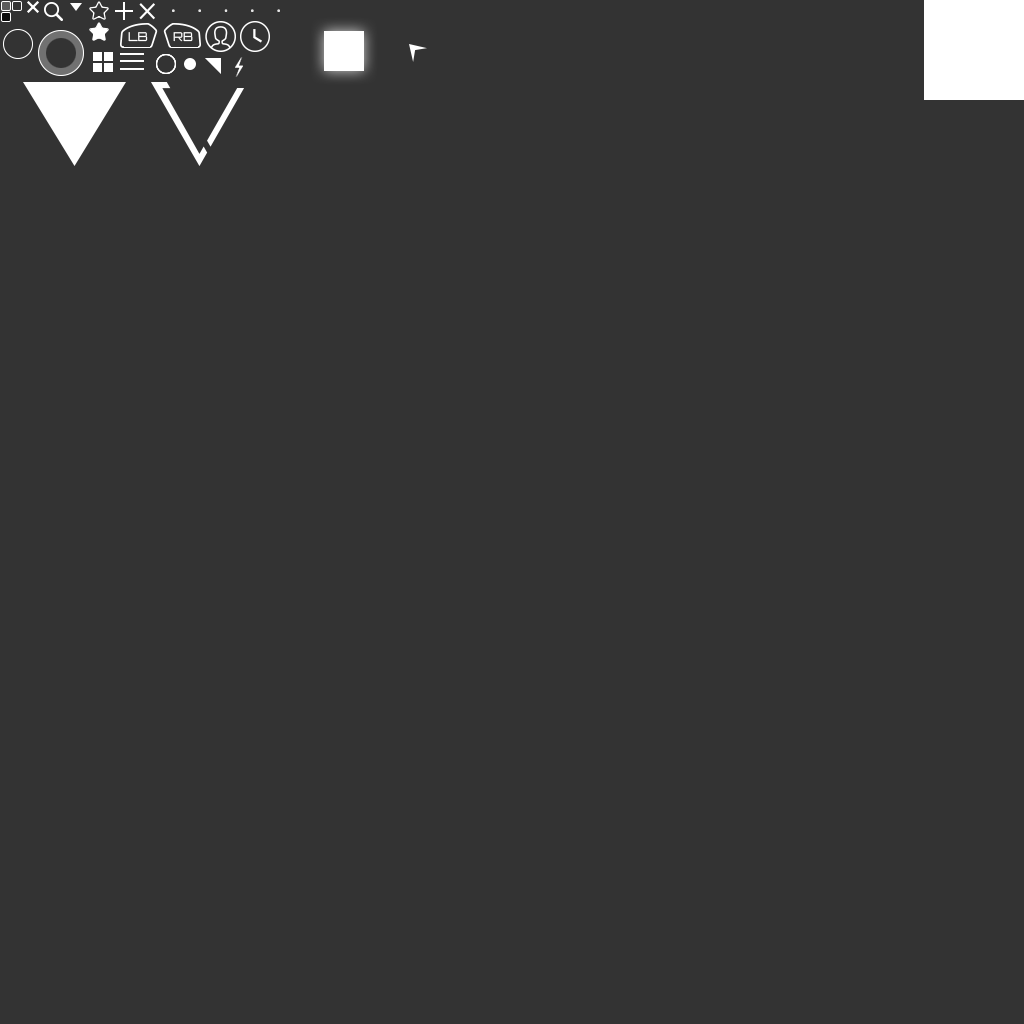
<style>
.page{position:relative;width:1024px;height:1024px;background:#333333}
.page>*{position:absolute;margin:0}
.t1{font:12.2px "Orbitron-Regular";color:#ffffff;text-transform:uppercase}
.t2{font:12.1px "Orbitron-Regular";color:#ffffff;text-transform:uppercase}
</style>
<div class="page">
<p class="t1" style="left:128px;top:32px;width:20px;height:10px">LB</p>
<p class="t2" style="left:173px;top:32px;width:20px;height:10px">RB</p>
</div>
